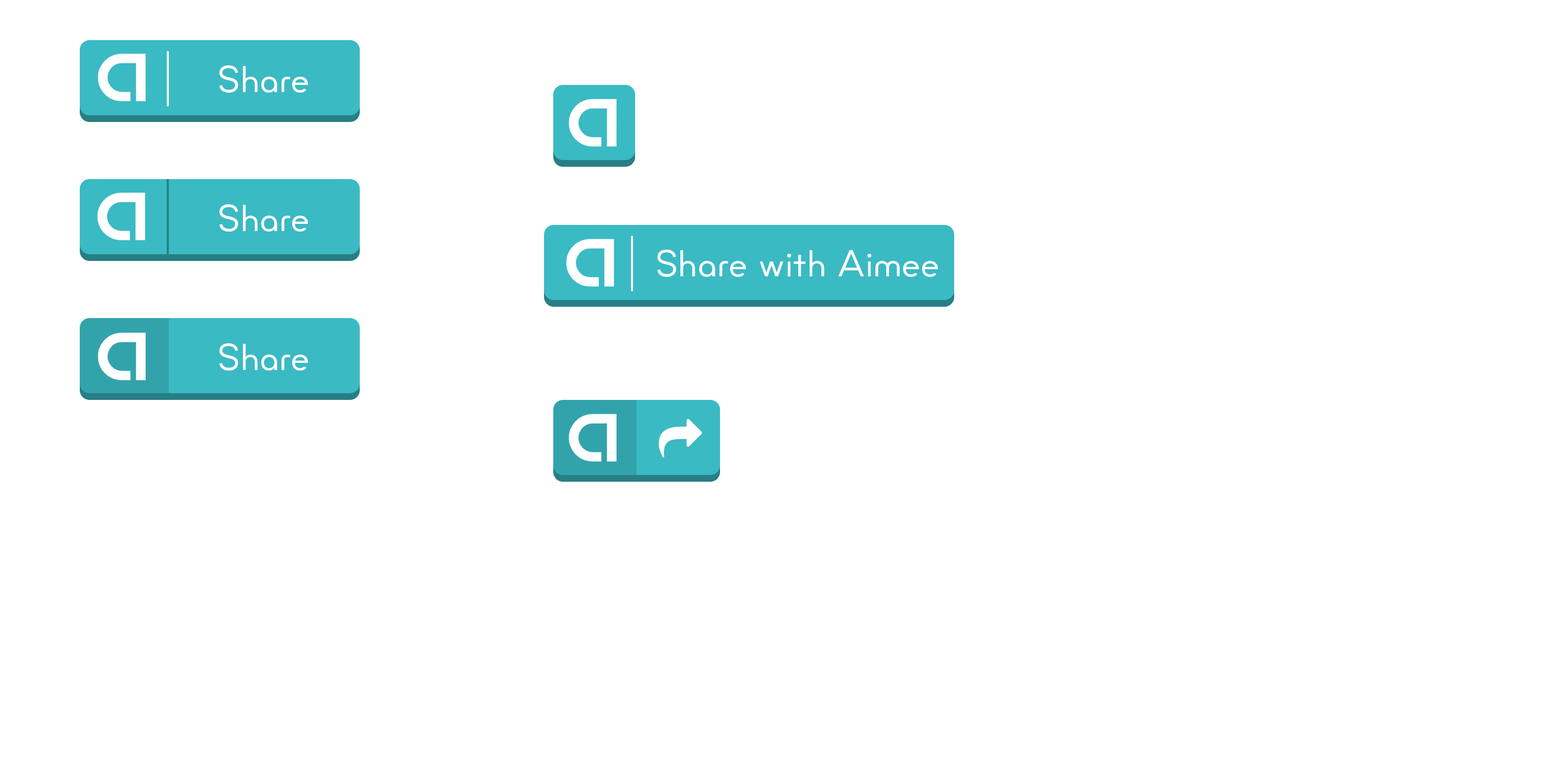
<style>
.page{position:relative;width:1544px;height:772px;background:#ffffff}
.page>*{position:absolute;margin:0}
.t1{font:37.7px "Minimo-Regular";color:#ffffff}
</style>
<div class="page">
<p class="t1" style="left:219px;top:65px;width:89px;height:28px">Share</p>
<p class="t1" style="left:219px;top:204px;width:89px;height:28px">Share</p>
<p class="t1" style="left:657px;top:250px;width:281px;height:27px">Share with Aimee</p>
<p class="t1" style="left:219px;top:343px;width:89px;height:28px">Share</p>
</div>
